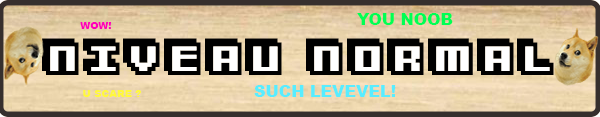
<style>
.page{position:relative;width:600px;height:117px}
.page>*{position:absolute;margin:0}
.t1{font:16px "Arial-Black";color:#00ff54}
.t2{font:10px "Arial-Black";color:#ff00b9}
.t3{font:16px "Arial-Black";color:#58edff}
.t4{font:16px "Arial-Black";color:#ff00b9}
.t5{font:10px "Arial-Black";color:#fff83d}
</style>
<div class="page">
<p class="t1" style="left:357px;top:13px;width:96px;height:12px">YOU NOOB</p>
<p class="t2" style="left:80px;top:22px;width:32px;height:7px">WOW!</p>
<p class="t3" style="left:254px;top:85px;width:142px;height:12px">SUCH LEVEVEL<span class="t4">!</span></p>
<p class="t5" style="left:83px;top:90px;width:58px;height:7px">U SCARE ?</p>
</div>
